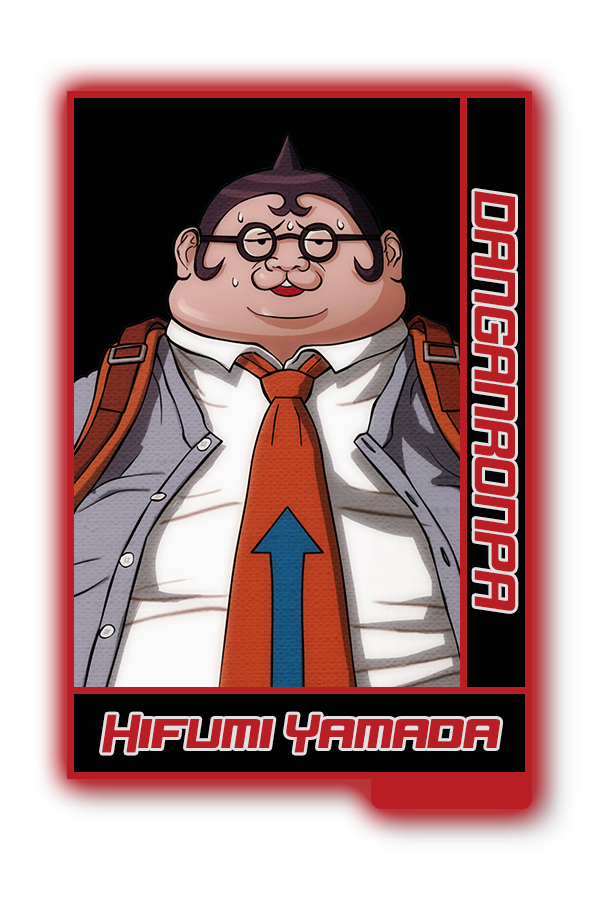
<style>
.page{position:relative;width:600px;height:900px;background:#ffffff}
.page>*{position:absolute;margin:0}
.t1{font:48.8px "DorBlue";color:#bb2c2e}
.t2{font:45.6px "DorBlue";color:#bb2c2e}
</style>
<div class="page">
<p class="t1" style="left:474px;top:191px;width:42px;height:420px;rotate:90deg">DANGANRONPA</p>
<p class="t2" style="left:102px;top:714px;width:398px;height:39px">Hifumi Yamada</p>
</div>
